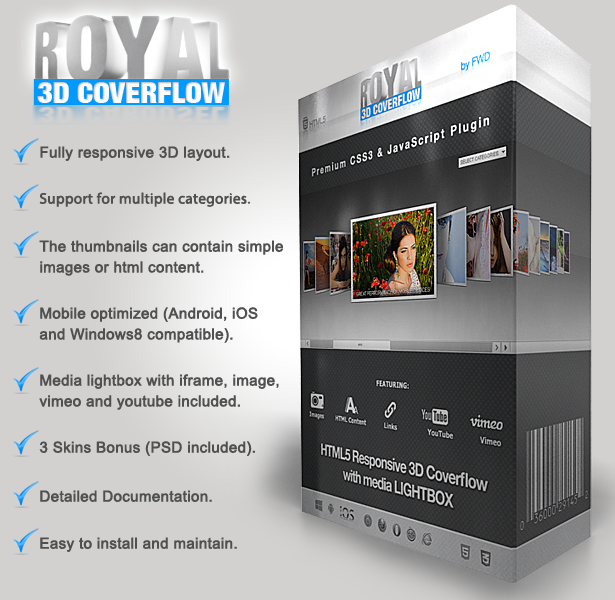
<style>
.page{position:relative;width:615px;height:600px;background:#d2d1d0}
.page>*{position:absolute;margin:0}
.t1{font:15px "ArialMT";color:#505050;font-weight:bold}
.t2{font:15px "MyriadPro-Regular";color:#505050;font-weight:bold}
.t3{font:15px/20.8px "ArialMT";color:#505050;font-weight:bold}
</style>
<div class="page">
<p class="t1" style="left:40px;top:146px;width:190px;height:15px">Fully responsive 3D layout.</p>
<p class="t2" style="left:39px;top:192px;width:212px;height:15px">Support for multiple categories.</p>
<p class="t3" style="left:39px;top:240px;width:244px;height:36px;text-align:justify">The thumbnails can contain simple <br>images or html content.</p>
<p class="t3" style="left:39px;top:307px;width:219px;height:36px;text-align:justify">Mobile optimized (Android, iOS  <br>and Windows8 compatible).</p>
<p class="t3" style="left:39px;top:374px;width:240px;height:36px;text-align:justify">Media lightbox with iframe, image, <br>vimeo and youtube included.</p>
<p class="t1" style="left:39px;top:441px;width:216px;height:15px">3 Skins Bonus (PSD included).</p>
<p class="t1" style="left:40px;top:490px;width:172px;height:12px">Detailed Documentation.</p>
<p class="t1" style="left:40px;top:537px;width:197px;height:15px">Easy to install and maintain.</p>
</div>
